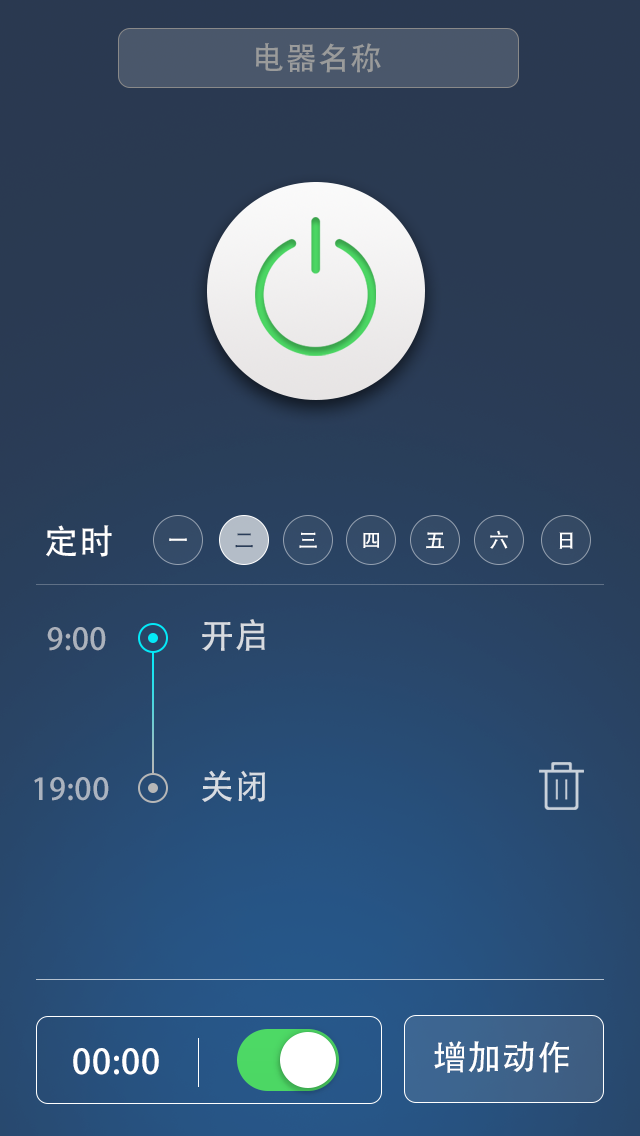
<style>
.page{position:relative;width:640px;height:1136px}
.page>*{position:absolute;margin:0}
.t1{font:32px "AdobeHeitiStd-Regular";letter-spacing:0.025em;color:#9a9b9b}
.t2{font:34px "AdobeHeitiStd-Regular";letter-spacing:0.025em;color:#ffffff}
.t3{font:20.5px "AdobeHeitiStd-Regular";letter-spacing:0.025em;color:#2a3d59}
.t4{font:20.5px "AdobeHeitiStd-Regular";letter-spacing:0.025em;color:#ffffff}
.t5{font:30px "AdobeHeitiStd-Regular";letter-spacing:0.025em;color:#abb2bc}
.t6{font:34px "AdobeHeitiStd-Regular";letter-spacing:0.025em;color:#d7dbe0}
.t7{font:34px "AdobeHeitiStd-Regular";letter-spacing:0.025em;color:#d7dce2}
.t8{font:30px "AdobeHeitiStd-Regular";letter-spacing:0.025em;color:#abb3bf}
</style>
<div class="page">
<p class="t1" style="left:256px;top:43px;width:125px;height:30px">电器名称</p>
<p class="t2" style="left:46px;top:525px;width:66px;height:32px">定时</p>
<p class="t3" style="left:235px;top:533px;width:18px;height:15px">二</p>
<p class="t4" style="left:299px;top:532px;width:18px;height:16px">三</p>
<p class="t4" style="left:363px;top:532px;width:16px;height:16px">四</p>
<p class="t4" style="left:426px;top:532px;width:18px;height:17px">五</p>
<p class="t4" style="left:490px;top:530px;width:18px;height:19px">六</p>
<p class="t4" style="left:559px;top:532px;width:14px;height:17px">日</p>
<p class="t4" style="left:169px;top:538px;width:18px;height:3px">一</p>
<p class="t5" style="left:47px;top:627px;width:59px;height:24px">9:00</p>
<p class="t6" style="left:202px;top:619px;width:63px;height:32px">开启</p>
<p class="t7" style="left:202px;top:770px;width:63px;height:32px">关闭</p>
<p class="t8" style="left:34px;top:777px;width:75px;height:24px">19:00</p>
<p class="t2" style="left:73px;top:1048px;width:86px;height:27px">00:00</p>
<p class="t2" style="left:434px;top:1041px;width:135px;height:32px">增加动作</p>
</div>
